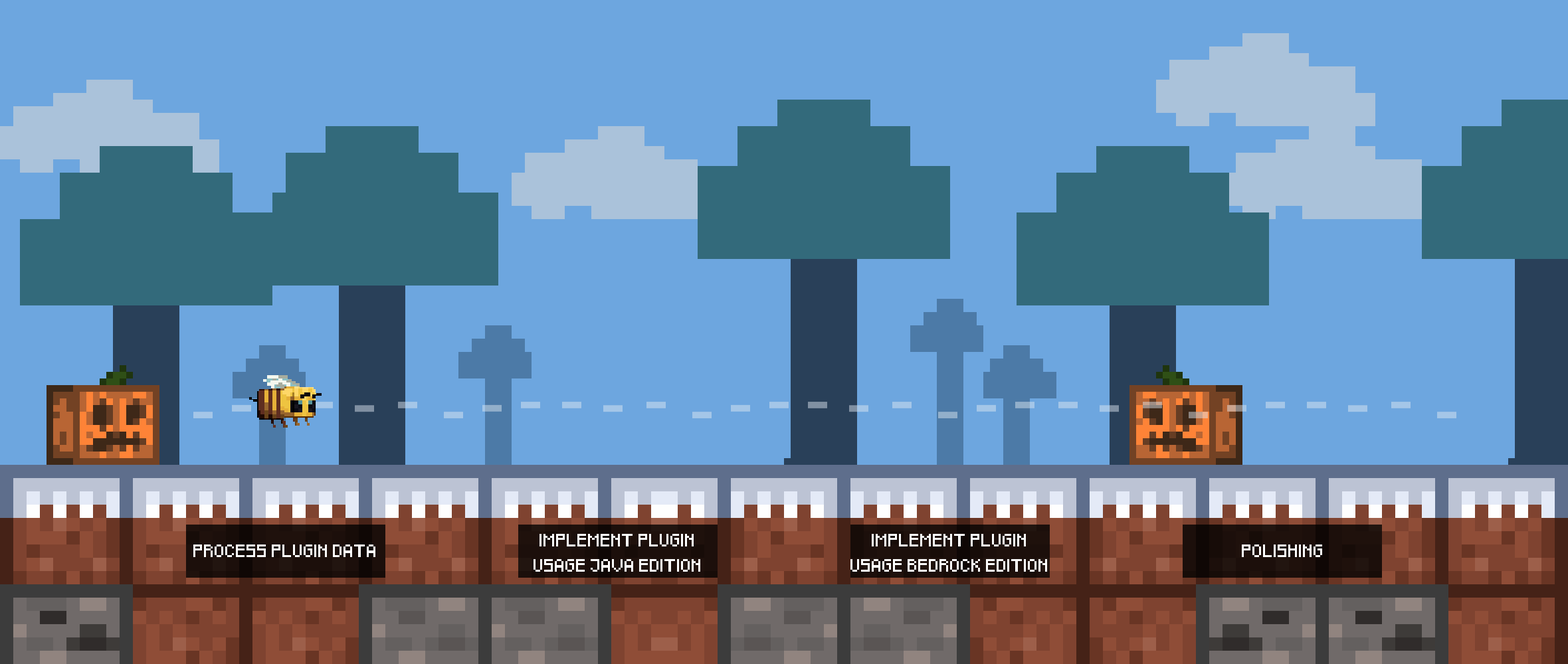
<style>
.page{position:relative;width:1568px;height:664px;background:#6da6df}
.page>*{position:absolute;margin:0}
.t1{font:10.6px "Pixeled";color:#ffffff}
</style>
<div class="page">
<p class="t1" style="left:193px;top:545px;width:182px;height:12px">PROCESS PLUGIN DATA</p>
<p class="t1" style="left:534px;top:534px;width:166px;height:38px;text-align:center">IMPLEMENT PLUGIN<br><br>USAGE JAVA EDITION</p>
<p class="t1" style="left:850px;top:534px;width:197px;height:38px;text-align:center">IMPLEMENT PLUGIN<br><br>USAGE BEDROCK EDITION</p>
<p class="t1" style="left:1242px;top:545px;width:80px;height:12px">POLISHING</p>
</div>
